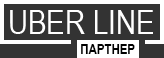
<style>
.page{position:relative;width:164px;height:58px;background:#333333}
.page>*{position:absolute;margin:0}
.t1{font:34px "ArialNarrow";color:#ffffff}
.t2{font:14px "ArialNarrow-Bold";color:#000000}
</style>
<div class="page">
<p class="t1" style="left:10px;top:10px;width:143px;height:24px">UBER LINE</p>
<p class="t2" style="left:81px;top:44px;width:54px;height:10px">ПАРТНЕР</p>
</div>
